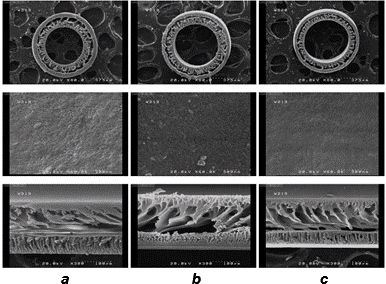
<style>
.page{position:relative;width:386px;height:284px}
.page>*{position:absolute;margin:0}
.t1{font:14.6px "Arial-BoldItalicMT";color:#000000}
</style>
<div class="page">
<p class="t1" style="left:61px;top:276px;width:8px;height:8px">a</p>
<p class="t1" style="left:192px;top:273px;width:9px;height:11px">b</p>
<p class="t1" style="left:320px;top:276px;width:8px;height:8px">c</p>
</div>
